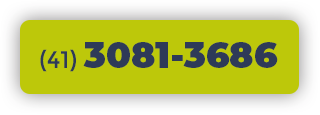
<style>
.page{position:relative;width:320px;height:115px;background:#bdc80a}
.page>*{position:absolute;margin:0}
.t1{font:36px "Montserrat-Black";color:#2e3a58}
.t2{font:24px "Montserrat-Regular";color:#2e3a58}
</style>
<div class="page">
<p class="t1" style="left:40px;top:42px;width:238px;height:30px"><span class="t2">(41) </span>3081-3686</p>
</div>
